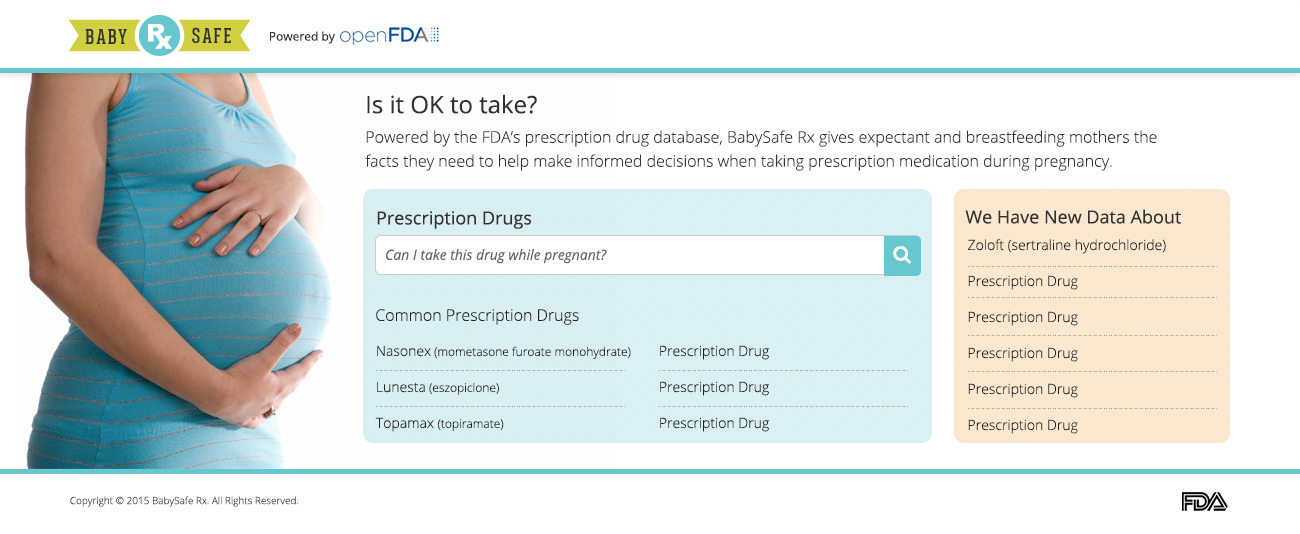
<style>
.page{position:relative;width:1300px;height:534px;background:#ffffff}
.page>*{position:absolute;margin:0}
.t1{font:12px "OpenSans";color:#333333}
.t2{font:24px "OpenSans";color:#333333}
.t3{font:16px/24px "OpenSans-Light";color:#333333}
.t4{font:18px "OpenSans";color:#333333}
.t5{font:14px/36px "OpenSans-Light";color:#222222}
.t6{font:14px "OpenSans-Italic";color:#666666}
.t7{font:16px "OpenSans-Light";color:#222222}
.t8{font:12px/36px "OpenSans-Light";color:#222222}
.t9{font:10px "OpenSans-Light";color:#333333}
</style>
<div class="page">
<p class="t1" style="left:270px;top:31px;width:65px;height:13px">Powered by</p>
<p class="t2" style="left:367px;top:94px;width:170px;height:20px">Is it OK to take?</p>
<p class="t3" style="left:365px;top:130px;width:792px;height:41px">Powered by the FDA’s prescription drug database, BabySafe Rx gives expectant and breastfeeding mothers the facts they need to help make informed decisions when taking prescription medication during pregnancy.</p>
<p class="t4" style="left:965px;top:209px;width:216px;height:15px">We Have New Data About</p>
<p class="t4" style="left:377px;top:211px;width:155px;height:18px">Prescription Drugs</p>
<p class="t5" style="left:968px;top:239px;width:198px;height:195px">Zoloft (sertraline hydrochloride)<br>Prescription Drug<br>Prescription Drug<br>Prescription Drug<br>Prescription Drug<br>Prescription Drug</p>
<p class="t6" style="left:386px;top:249px;width:221px;height:15px">Can I take this drug while pregnant?</p>
<p class="t7" style="left:376px;top:309px;width:203px;height:16px">Common Prescription Drugs</p>
<p class="t8" style="left:375px;top:345px;width:256px;height:87px"><span class="t5">Nasonex</span> (mometasone furoate monohydrate)<br><span class="t5">Lunesta</span> (eszopiclone)<br><span class="t5">Topamax </span>(topiramate)</p>
<p class="t5" style="left:660px;top:345px;width:109px;height:87px">Prescription Drug<br>Prescription Drug<br>Prescription Drug</p>
<p class="t9" style="left:70px;top:496px;width:228px;height:11px">Copyright © 2015 BabySafe Rx. All Rights Reserved.</p>
</div>
